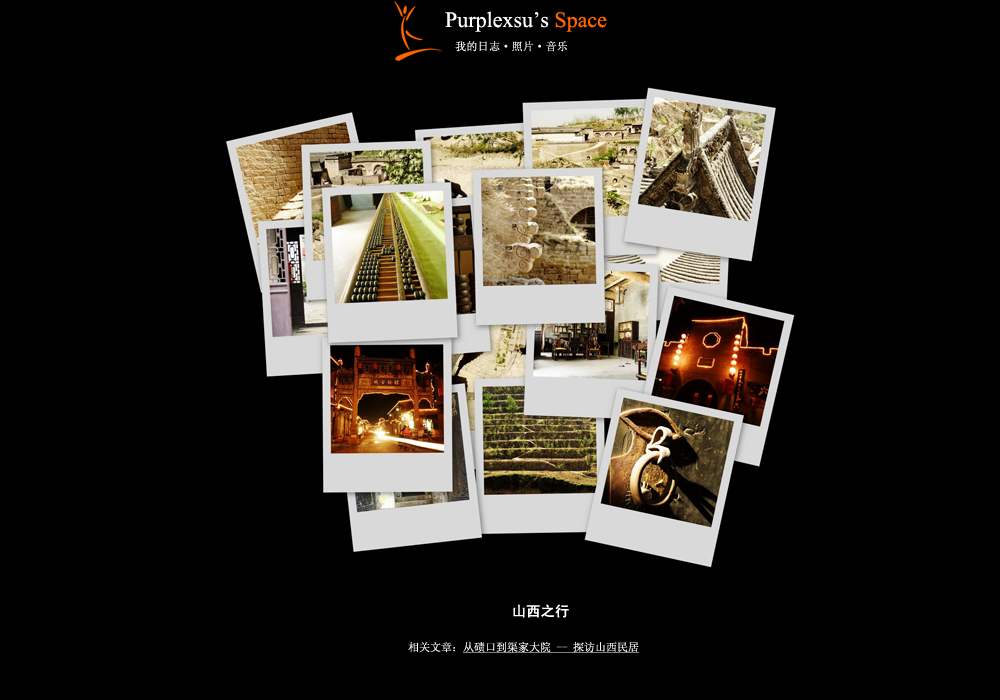
<style>
.page{position:relative;width:1000px;height:700px;background:#000000}
.page>*{position:absolute;margin:0}
.t1{font:22px "TimesNewRomanPSMT";color:#ffffff}
.t2{font:22px "TimesNewRomanPSMT";color:#ff6600}
.t3{font:11px "SimSun";color:#ffffff;font-weight:bold}
.t4{font:14px "SimHei";color:#ffffff;font-weight:bold}
.t5{font:11px "SimSun";color:#ffffff;text-decoration:underline}
.t6{font:11px "SimSun";color:#ffffff}
</style>
<div class="page">
<p class="t1" style="left:445px;top:11px;width:162px;height:21px">Purplexsu’s <span class="t2">Space</span></p>
<p class="t3" style="left:455px;top:41px;width:112px;height:11px">我的日志·照片·音乐</p>
<p class="t4" style="left:513px;top:604px;width:56px;height:14px">山西之行</p>
<p class="t5" style="left:408px;top:642px;width:232px;height:11px"><span class="t6">相关文章：</span>从碛口到渠家大院 -- 探访山西民居</p>
</div>
